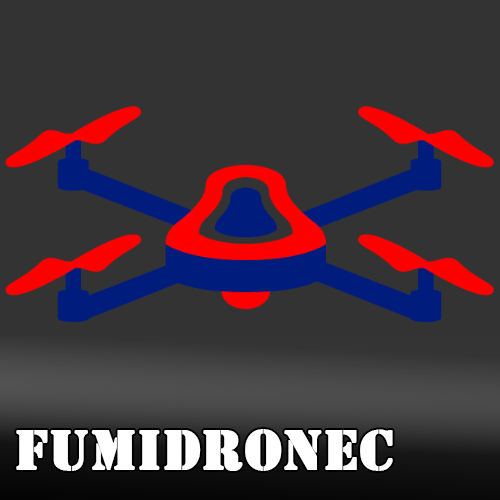
<style>
.page{position:relative;width:500px;height:500px;background:#333333}
.page>*{position:absolute;margin:0}
.t1{font:58.3px "Stencil";color:#ffffff;font-weight:bold}
</style>
<div class="page">
<p class="t1" style="left:16px;top:429px;width:377px;height:42px">FUMIDRONEC</p>
</div>
